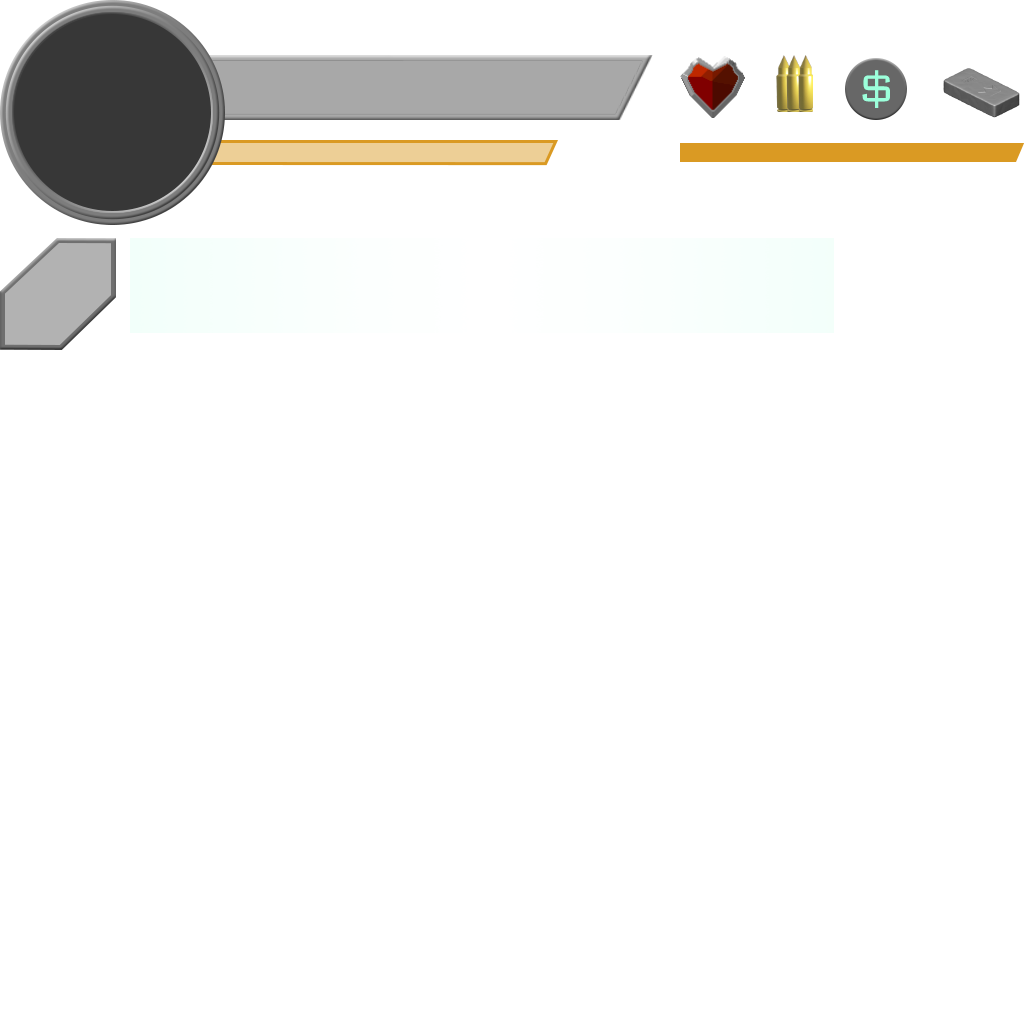
<style>
.page{position:relative;width:1024px;height:1024px;background:#ffffff}
.page>*{position:absolute;margin:0}
.t1{font:49.9px "BankGothicBT-Light";color:#9cffdb}
</style>
<div class="page">
<p class="t1" style="left:862px;top:70px;width:28px;height:38px">$</p>
</div>
